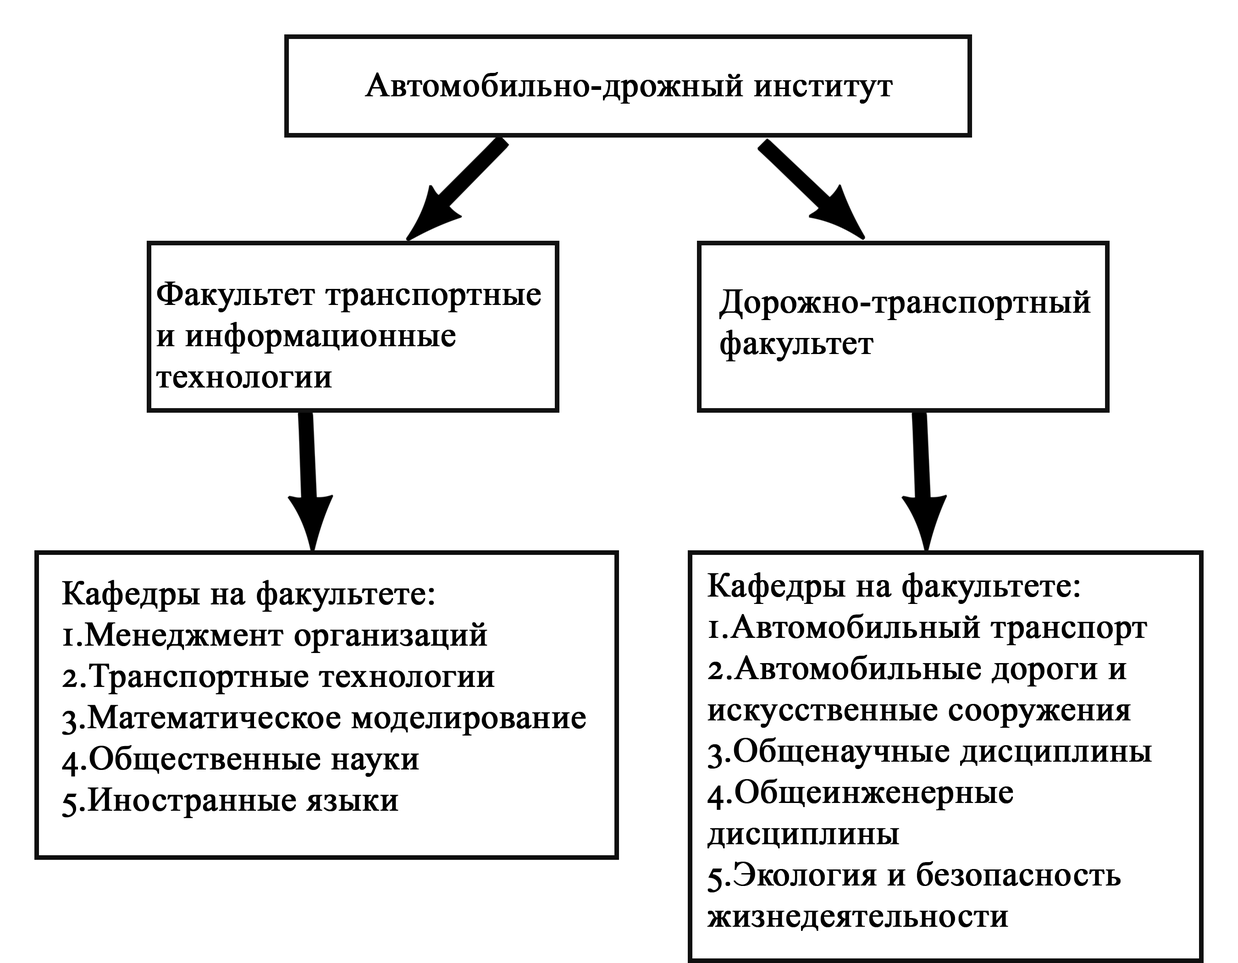
<style>
.page{position:relative;width:1238px;height:963px;background:#ffffff}
.page>*{position:absolute;margin:0}
.t1{font:34.4px "TimesNewRomanPSMT";color:#000000;font-weight:bold}
</style>
<div class="page">
<p class="t1" style="left:365px;top:72px;width:528px;height:32px">Автомобильно-дрожный институт</p>
<p class="t1" style="left:156px;top:282px;width:385px;height:106px">Факультет транспортные <br>и информационные <br>технологии</p>
<p class="t1" style="left:719px;top:289px;width:372px;height:72px">Дорожно-транспортный<br>факультет</p>
<p class="t1" style="left:62px;top:580px;width:524px;height:238px">Кафедры на факультете:<br>1.Менеджмент организаций<br>2.Транспортные технологии<br>3.Математическое моделирование<br>4.Общественные науки<br>5.Иностранные языки</p>
<p class="t1" style="left:707px;top:572px;width:445px;height:359px">Кафедры на факультете:<br>1.Автомобильный транспорт<br>2.Автомобильные дороги и <br>искусcтвенные сооружения<br>3.Общенаучные дисциплины<br>4.Общеинженерные <br>дисциплины<br>5.Экология и безопасность <br>жизнедеятельности</p>
</div>
